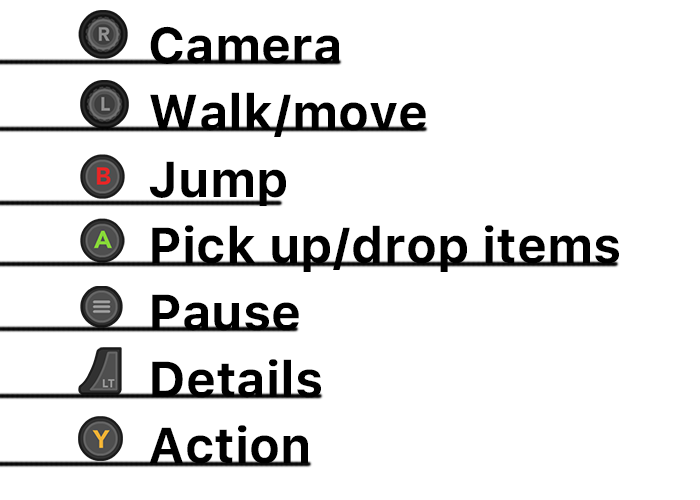
<style>
.page{position:relative;width:700px;height:500px;background:#ffffff}
.page>*{position:absolute;margin:0}
.t1{font:50px/66.7px "Galvji-Bold";color:#000000}
</style>
<div class="page">
<p class="t1" style="left:149px;top:26px;width:470px;height:438px">Camera<br>Walk/move<br>Jump<br>Pick up/drop items<br>Pause<br>Details<br>Action</p>
</div>
